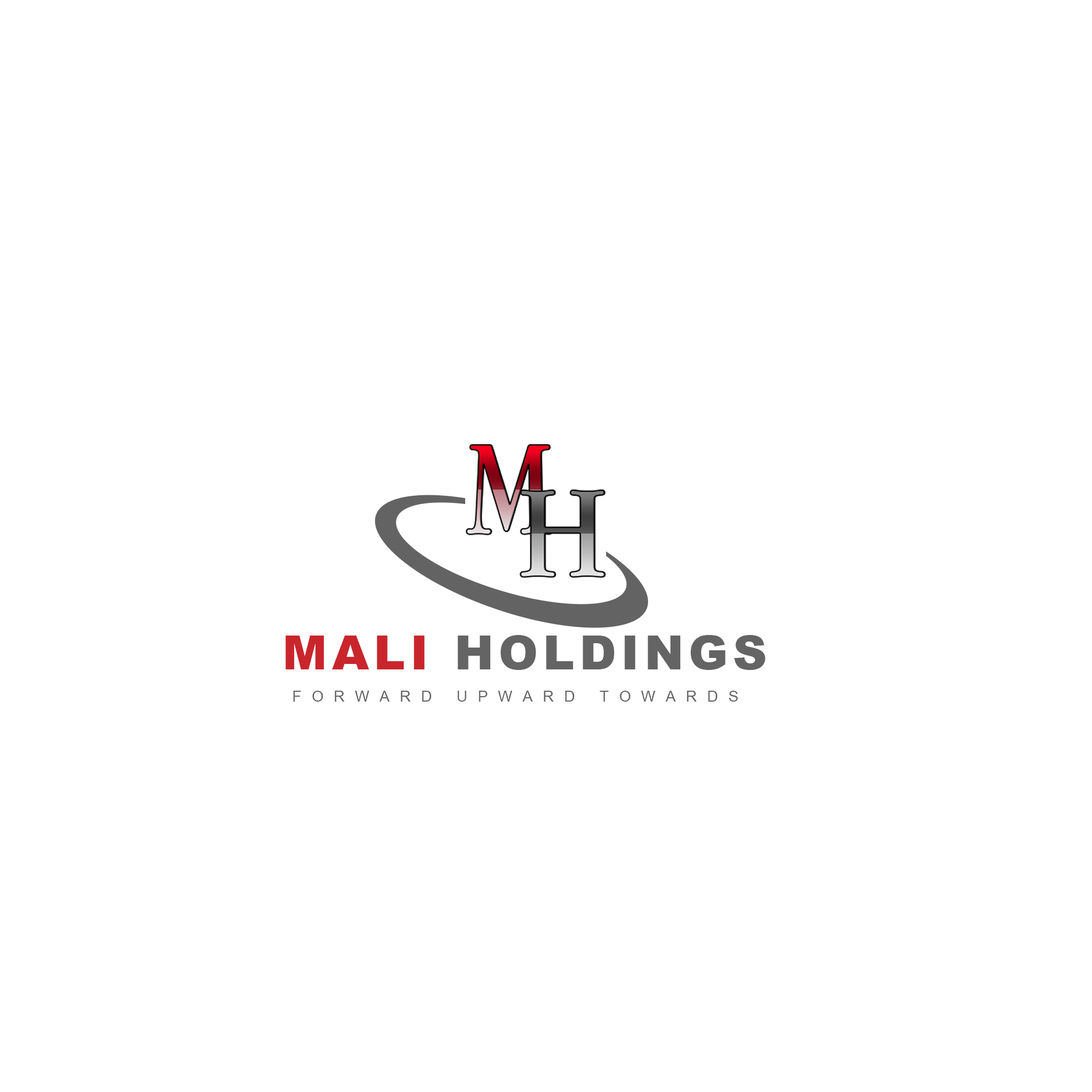
<style>
.page{position:relative;width:1092px;height:1092px;background:#ffffff}
.page>*{position:absolute;margin:0}
.t1{font:47.5px "Arial-Black";letter-spacing:0.1em;color:#646464}
.t2{font:47.5px "Arial-Black";letter-spacing:0.1em;color:#c9252c}
.t3{font:15.3px "ArialMT";letter-spacing:0.66em;color:#646464}
</style>
<div class="page">
<p class="t1" style="left:286px;top:635px;width:479px;height:35px"><span class="t2">MALI </span>HOLDINGS</p>
<p class="t3" style="left:293px;top:691px;width:445px;height:11px">FORWARD UPWARD TOWARDS</p>
</div>
